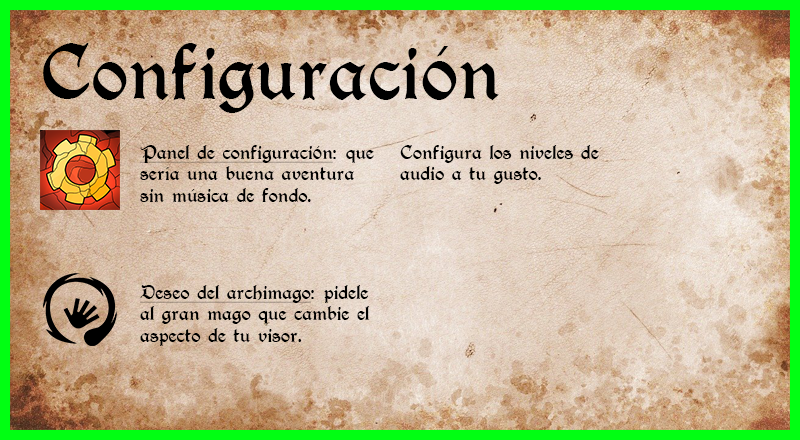
<style>
.page{position:relative;width:800px;height:440px}
.page>*{position:absolute;margin:0}
.t1{font:72px "T4C-Beaulieux";color:#000000}
.t2{font:18px "T4C-Beaulieux";color:#000000}
.t3{font:18px "T4C-Beaulieux";color:#000000;text-decoration:underline}
</style>
<div class="page">
<p class="t1" style="left:43px;top:43px;width:456px;height:70px">Configuración</p>
<p class="t2" style="left:140px;top:145px;width:234px;height:57px"><span class="t3">Panel de configuración</span>: que sería una buena aventura sin música de fondo.</p>
<p class="t2" style="left:400px;top:145px;width:199px;height:39px">Configura los niveles de audio a tu gusto.</p>
<p class="t2" style="left:140px;top:285px;width:229px;height:61px"><span class="t3">Deseo del archimago</span>: pidele al gran mago que cambie el aspecto de tu visor.</p>
</div>
